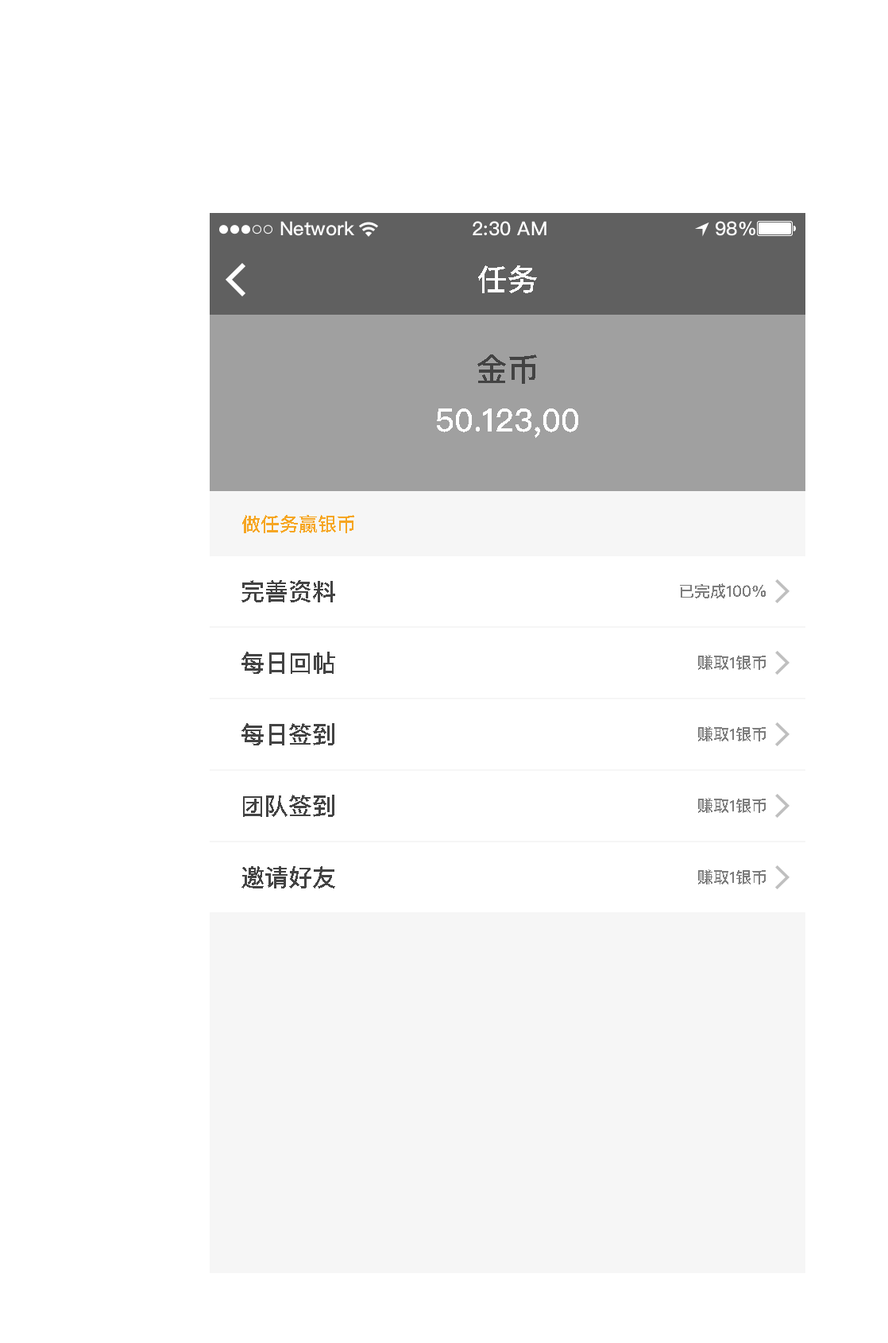
<style>
.page{position:relative;width:888px;height:1343px;background:#ffffff}
.page>*{position:absolute;margin:0}
.t1{font:30.2px "PingFangSC-Medium";color:#ffffff;text-transform:uppercase}
.t2{font:31.8px "PingFangSC-Medium";color:#434343;text-transform:uppercase}
.t3{font:31.8px "PingFangSC-Medium";color:#ffffff;text-transform:uppercase}
.t4{font:19.1px "PingFangSC-Medium";color:#f6a623;text-transform:uppercase}
.t5{font:23.8px "PingFangSC-Medium";color:#434343;text-transform:uppercase}
.t6{font:15.9px "PingFangSC-Medium";color:#7d7d7d;text-transform:uppercase}
</style>
<div class="page">
<p class="t1" style="left:478px;top:265px;width:59px;height:28px">任务</p>
<p class="t2" style="left:477px;top:354px;width:60px;height:30px">金币</p>
<p class="t3" style="left:437px;top:408px;width:141px;height:30px">50.123,00</p>
<p class="t4" style="left:242px;top:515px;width:112px;height:18px">做任务赢银币</p>
<p class="t5" style="left:242px;top:580px;width:93px;height:22px">完善资料</p>
<p class="t6" style="left:680px;top:583px;width:86px;height:15px">已完成100%</p>
<p class="t5" style="left:242px;top:651px;width:93px;height:23px">每日回帖</p>
<p class="t6" style="left:698px;top:655px;width:68px;height:15px">赚取1银币</p>
<p class="t5" style="left:242px;top:723px;width:92px;height:22px">每日签到</p>
<p class="t6" style="left:698px;top:726px;width:68px;height:15px">赚取1银币</p>
<p class="t5" style="left:243px;top:794px;width:91px;height:23px">团队签到</p>
<p class="t6" style="left:698px;top:798px;width:68px;height:15px">赚取1银币</p>
<p class="t5" style="left:242px;top:866px;width:93px;height:22px">邀请好友</p>
<p class="t6" style="left:698px;top:869px;width:68px;height:15px">赚取1银币</p>
</div>
